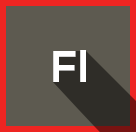
<style>
.page{position:relative;width:136px;height:132px;background:#5d5a50}
.page>*{position:absolute;margin:0}
.t1{font:44.4px "NexaBold";color:#ffffff}
</style>
<div class="page">
<p class="t1" style="left:53px;top:50px;width:33px;height:32px">FI</p>
</div>
